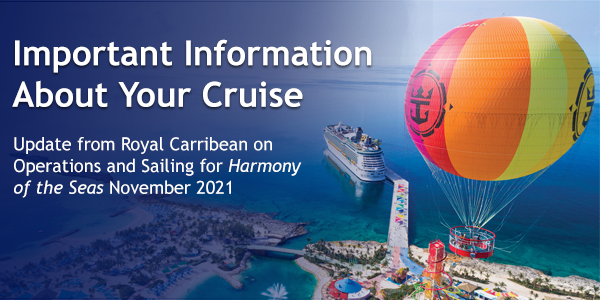
<style>
.page{position:relative;width:600px;height:300px}
.page>*{position:absolute;margin:0}
.t1{font:34.7px "TrebuchetMS-Bold";color:#ffffff}
.t2{font:18.1px "TrebuchetMS";color:#ffffff}
.t3{font:18.1px "TrebuchetMS-Italic";color:#ffffff}
</style>
<div class="page">
<p class="t1" style="left:12px;top:39px;width:360px;height:68px">Important Information About Your Cruise</p>
<p class="t2" style="left:14px;top:137px;width:288px;height:61px">Update from Royal Carribean on Operations and Sailing for <span class="t3">Harmony of the Seas </span>November 2021</p>
</div>
